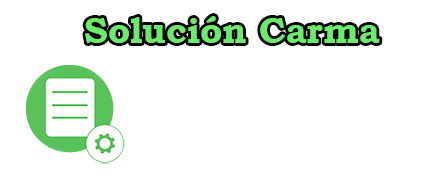
<style>
.page{position:relative;width:430px;height:180px;background:#ffffff}
.page>*{position:absolute;margin:0}
.t1{font:36px "BookmanOldStyle-Bold";color:#6aeb6a}
</style>
<div class="page">
<p class="t1" style="left:85px;top:16px;width:295px;height:27px">Solución Carma</p>
</div>
